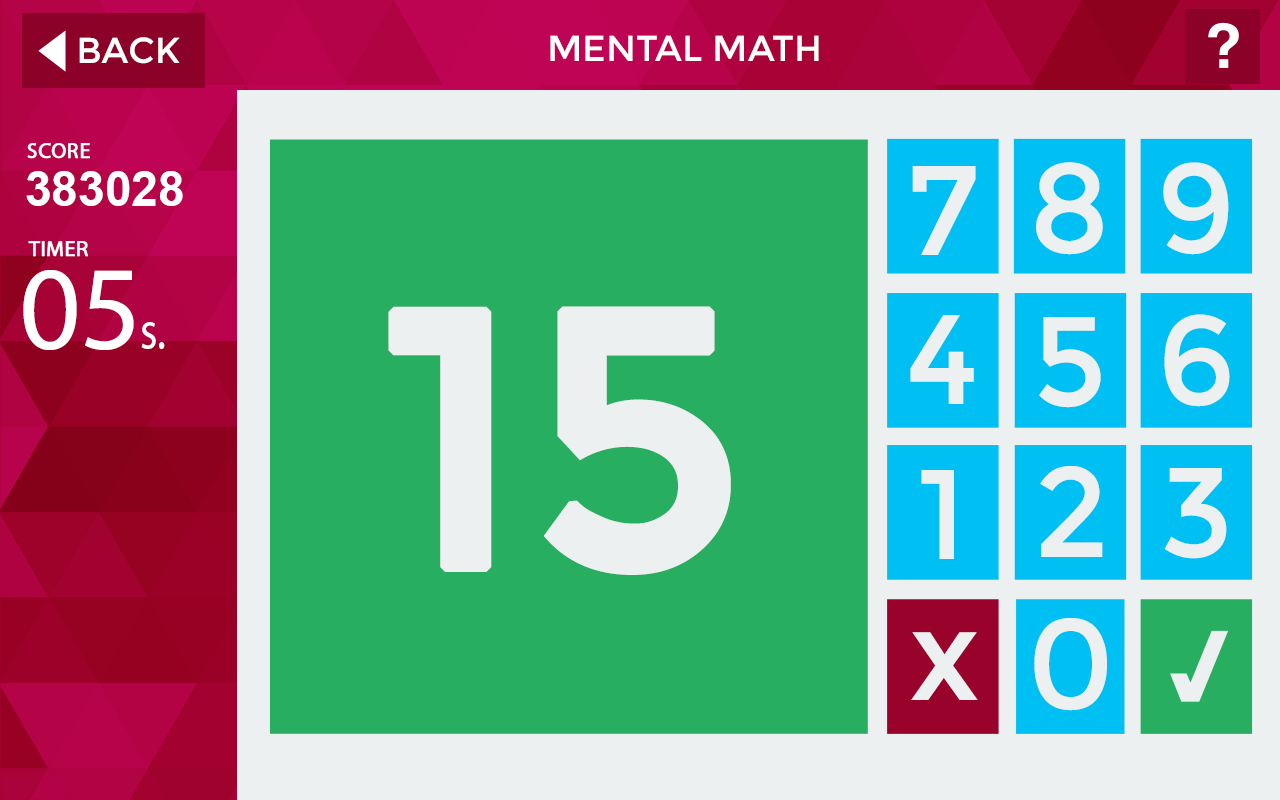
<style>
.page{position:relative;width:1280px;height:800px;background:#27ae61}
.page>*{position:absolute;margin:0}
.t1{font:36px "Montserrat-Regular";color:#ffffff}
.t2{font:36px "Montserrat-Regular";color:#ffffff;text-transform:uppercase}
.t3{font:22px "MyriadPro-Regular";color:#ffffff;font-weight:bold}
.t4{font:48px "Arial-BoldMT";color:#ffffff}
.t5{font:127.4px "Montserrat-Regular";color:#ecf0f1}
.t6{font:120px "MyriadPro-Regular";color:#ffffff}
.t7{font:365px "Montserrat-Regular";color:#ecf0f1;text-transform:uppercase;font-weight:bold}
.t8{font:55px "MyriadPro-Regular";color:#ffffff;scale:0.8 1}
</style>
<div class="page">
<p class="t1" style="left:79px;top:37px;width:101px;height:27px">BACK</p>
<p class="t2" style="left:550px;top:35px;width:269px;height:26px">Mental math</p>
<p class="t3" style="left:27px;top:143px;width:63px;height:16px">SCORE</p>
<p class="t4" style="left:26px;top:171px;width:157px;height:35px">383028</p>
<p class="t5" style="left:912px;top:166px;width:64px;height:89px">7</p>
<p class="t5" style="left:1036px;top:162px;width:67px;height:93px">8</p>
<p class="t5" style="left:1163px;top:162px;width:66px;height:93px">9</p>
<p class="t3" style="left:28px;top:241px;width:60px;height:16px">TIMER</p>
<p class="t6" style="left:23px;top:270px;width:111px;height:80px">05</p>
<p class="t7" style="left:388px;top:306px;width:343px;height:269px">15</p>
<p class="t5" style="left:910px;top:315px;width:64px;height:89px">4</p>
<p class="t5" style="left:1039px;top:317px;width:62px;height:91px">5</p>
<p class="t5" style="left:1164px;top:314px;width:66px;height:93px">6</p>
<p class="t8" style="left:141px;top:322px;width:24px;height:27px">s.</p>
<p class="t5" style="left:921px;top:470px;width:33px;height:89px">1</p>
<p class="t5" style="left:1040px;top:466px;width:63px;height:91px">2</p>
<p class="t5" style="left:1164px;top:468px;width:63px;height:91px">3</p>
<p class="t5" style="left:1034px;top:618px;width:73px;height:93px">0</p>
<p class="t5" style="left:911px;top:632px;width:67px;height:68px">x</p>
</div>
